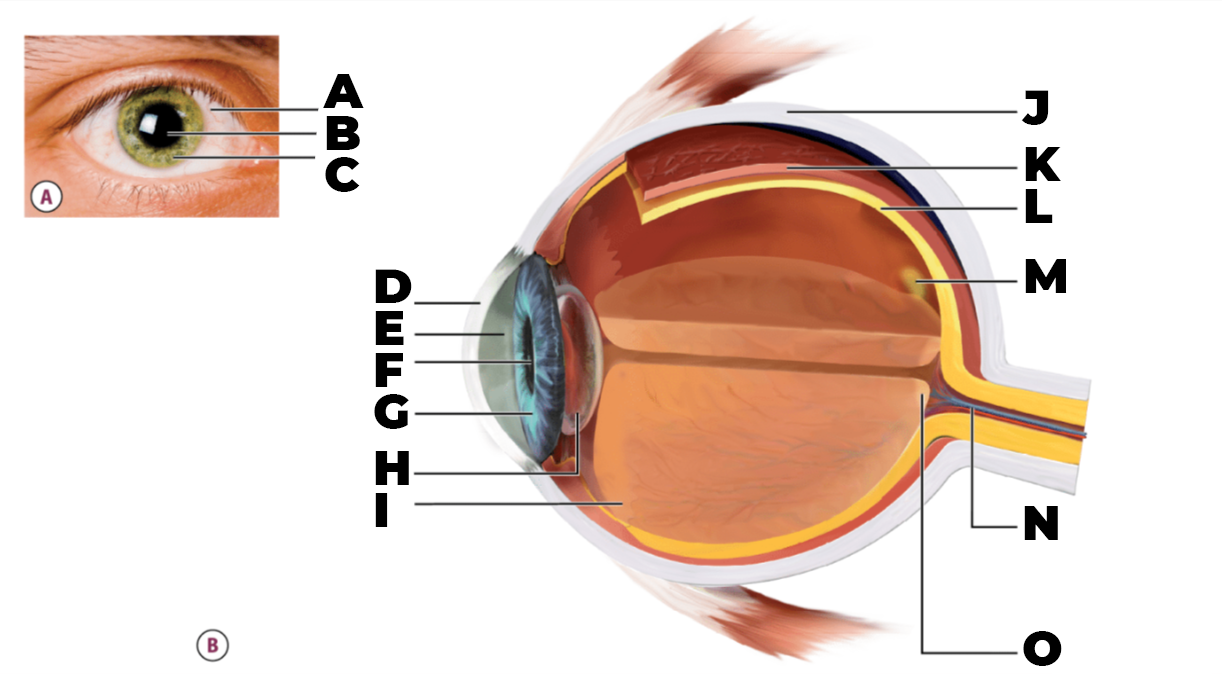
<style>
.page{position:relative;width:1222px;height:674px;background:#ffffff}
.page>*{position:absolute;margin:0}
.t1{font:48px/14px "Montserrat-Black";color:#000000}
</style>
<div class="page">
<p class="t1" style="left:323px;top:74px;width:41px;height:118px">A<br><br><br>B<br><br><br>C</p>
<p class="t1" style="left:1021px;top:90px;width:46px;height:203px">J<br><br><br><br>K<br><br><br>L<br><br><br><br><br>M</p>
<p class="t1" style="left:374px;top:269px;width:38px;height:258px">D<br><br><br>E<br><br><br>F<br><br><br>G<br><br><br><br>H<br><br><br>I</p>
<p class="t1" style="left:1023px;top:506px;width:39px;height:160px">N<br><br><br><br><br><br><br><br><br>O</p>
</div>
